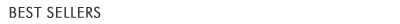
<style>
.page{position:relative;width:400px;height:24px;background:#ffffff}
.page>*{position:absolute;margin:0}
.t1{font:14.7px "FuturaBT-Light";letter-spacing:0.025em;color:#363636;text-transform:uppercase;font-weight:bold}
</style>
<div class="page">
<p class="t1" style="left:9px;top:6px;width:92px;height:12px">BEST SELLERS</p>
</div>
